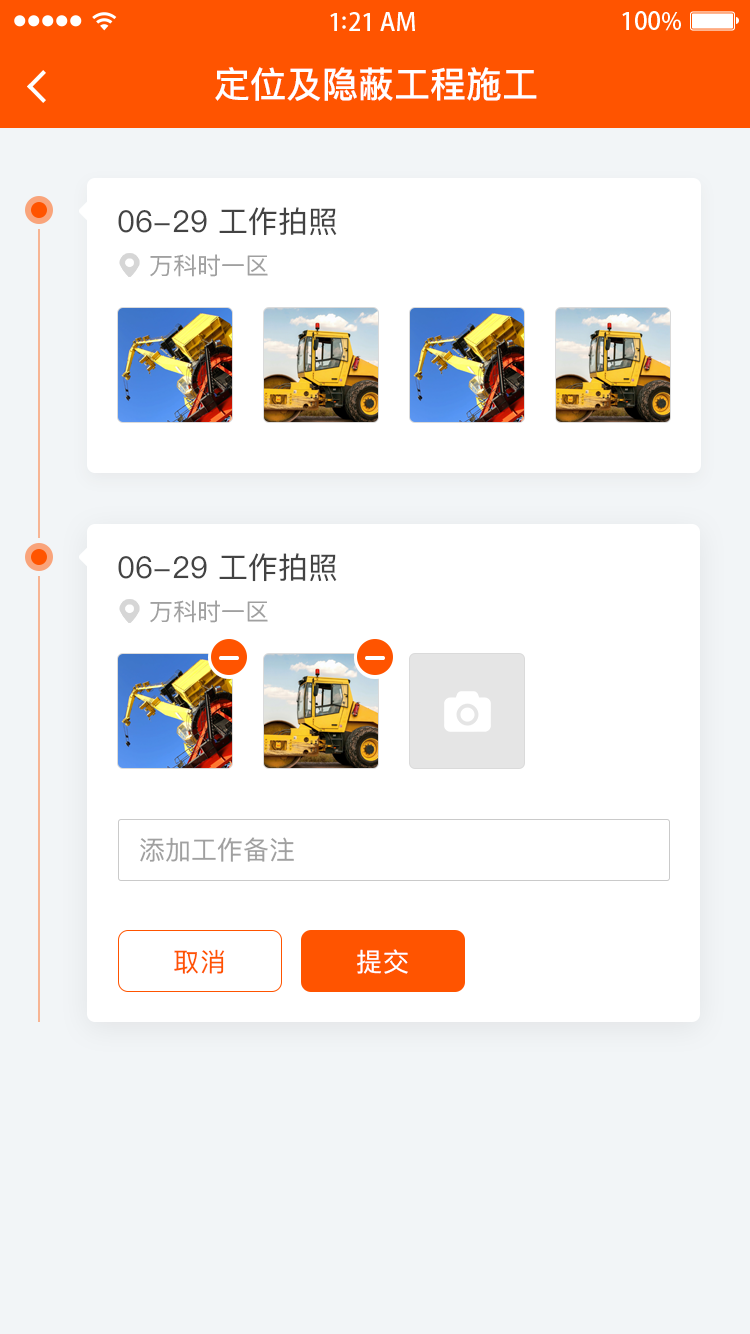
<style>
.page{position:relative;width:750px;height:1334px;background:#ffffff}
.page>*{position:absolute;margin:0}
.t1{font:36px "PingFangSC-Medium";color:#ffffff}
.t2{font:30px "PingFangSC-Regular";color:#434343}
.t3{font:24px "PingFangSC-Regular";color:#a0a0a0}
.t4{font:26px "PingFangSC-Regular";color:#a0a0a0}
.t5{font:26px "PingFangSC-Regular";letter-spacing:0.02em;color:#ff5400}
.t6{font:26px "PingFangSC-Regular";letter-spacing:0.02em;color:#ffffff}
</style>
<div class="page">
<p class="t1" style="left:215px;top:67px;width:322px;height:34px">定位及隐蔽工程施工</p>
<p class="t2" style="left:118px;top:207px;width:219px;height:29px">06-29 工作拍照</p>
<p class="t3" style="left:150px;top:254px;width:118px;height:23px">万科时一区</p>
<p class="t2" style="left:118px;top:553px;width:219px;height:29px">06-29 工作拍照</p>
<p class="t3" style="left:150px;top:600px;width:118px;height:23px">万科时一区</p>
<p class="t4" style="left:140px;top:837px;width:154px;height:25px">添加工作备注</p>
<p class="t5" style="left:174px;top:949px;width:51px;height:25px">取消</p>
<p class="t6" style="left:357px;top:949px;width:51px;height:25px">提交</p>
</div>
